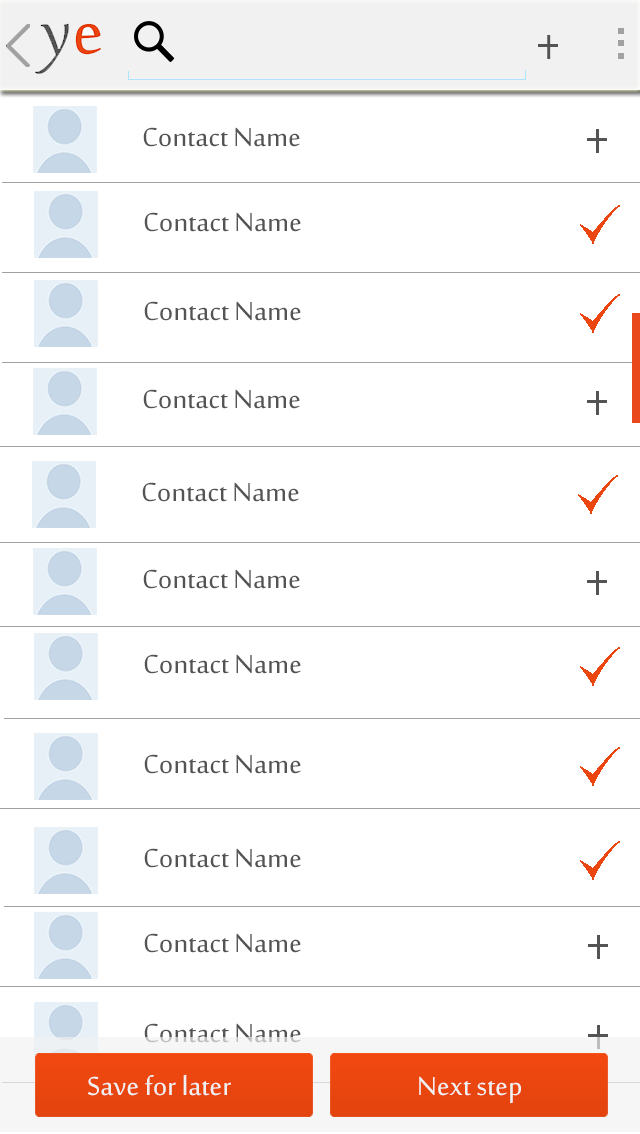
<style>
.page{position:relative;width:640px;height:1134px;background:#ffffff}
.page>*{position:absolute;margin:0}
.t1{font:36px "SakkalMajalla";color:#545454}
.t2{font:36px "SakkalMajalla"}
.t3{font:36px "SakkalMajalla";color:#f1f1f1}
</style>
<div class="page">
<p class="t1" style="left:143px;top:127px;width:157px;height:20px">Contact Name</p>
<p class="t1" style="left:144px;top:212px;width:157px;height:20px">Contact Name</p>
<p class="t1" style="left:144px;top:301px;width:157px;height:20px">Contact Name</p>
<p class="t1" style="left:143px;top:389px;width:157px;height:20px">Contact Name</p>
<p class="t1" style="left:142px;top:482px;width:157px;height:20px">Contact Name</p>
<p class="t1" style="left:143px;top:569px;width:157px;height:20px">Contact Name</p>
<p class="t1" style="left:144px;top:654px;width:157px;height:20px">Contact Name</p>
<p class="t1" style="left:144px;top:754px;width:157px;height:20px">Contact Name</p>
<p class="t1" style="left:144px;top:848px;width:157px;height:20px">Contact Name</p>
<p class="t1" style="left:144px;top:933px;width:157px;height:20px">Contact Name</p>
<p class="t2" style="left:144px;top:1023px;width:157px;height:20px">Contact Name</p>
<p class="t3" style="left:88px;top:1074px;width:143px;height:22px">Save for later</p>
<p class="t3" style="left:419px;top:1076px;width:102px;height:28px">Next step</p>
</div>
